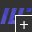
<style>
.page{position:relative;width:32px;height:32px;background:#333333}
.page>*{position:absolute;margin:0}
.t1{font:16px "HelveticaNeue";letter-spacing:0.04em;color:#fefefe}
</style>
<div class="page">
<p class="t1" style="left:19px;top:21px;width:10px;height:8px">+</p>
</div>
